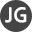
<style>
.page{position:relative;width:32px;height:32px;background:#454545}
.page>*{position:absolute;margin:0}
.t1{font:21.6px "Corbel";color:#ffffff;font-weight:bold}
</style>
<div class="page">
<p class="t1" style="left:5px;top:7px;width:22px;height:16px">JG</p>
</div>
